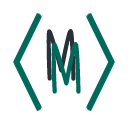
<style>
.page{position:relative;width:128px;height:128px;background:#ffffff}
.page>*{position:absolute;margin:0}
.t1{font:72px "ImWunderland-Bold";color:#263238}
.t2{font:72px "ImWunderland-Bold";color:#00695c}
</style>
<div class="page">
<p class="t1" style="left:46px;top:29px;width:30px;height:52px">M</p>
<p class="t2" style="left:51px;top:42px;width:30px;height:52px">M</p>
</div>
